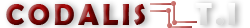
<style>
.page{position:relative;width:250px;height:28px;background:#ffffff}
.page>*{position:absolute;margin:0}
.t1{font:30.3px "BerlinSansFBDemi-Bold";letter-spacing:0.1em}
</style>
<div class="page">
<p class="t1" style="left:6px;top:4px;width:139px;height:21px">CODALIS</p>
</div>
